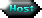
<style>
.page{position:relative;width:42px;height:18px;background:#ffffff}
.page>*{position:absolute;margin:0}
.t1{font:10px "LucidaSansUnicode";font-weight:bold}
</style>
<div class="page">
<p class="t1" style="left:10px;top:5px;width:24px;height:7px">Host</p>
</div>
